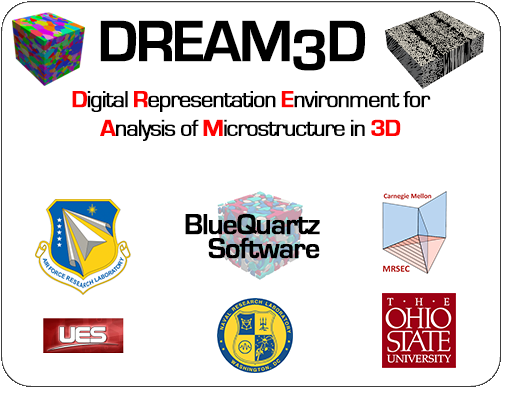
<style>
.page{position:relative;width:510px;height:400px;background:#ffffff}
.page>*{position:absolute;margin:0}
.t1{font:60px "EurostileBold";letter-spacing:-0.06em;color:#000000;font-weight:bold}
.t2{font:24px "EurostileRegular";letter-spacing:-0.06em;color:#000000;font-weight:bold}
.t3{font:24px "EurostileBold";letter-spacing:-0.06em;color:#ff0101;font-weight:bold}
.t4{font:30px/24px "EurostileBold";letter-spacing:-0.06em;color:#000000;font-weight:bold}
</style>
<div class="page">
<p class="t1" style="left:100px;top:20px;width:266px;height:51px">DREAM3D</p>
<p class="t2" style="left:72px;top:91px;width:359px;height:50px;text-align:center"><span class="t3">D</span>igital <span class="t3">R</span>epresentation <span class="t3">E</span>nvironment for<br><span class="t3">A</span>nalysis of <span class="t3">M</span>icrostructure in <span class="t3">3D</span></p>
<p class="t4" style="left:185px;top:214px;width:135px;height:45px;text-align:right">BlueQuartz<br>Software</p>
</div>
